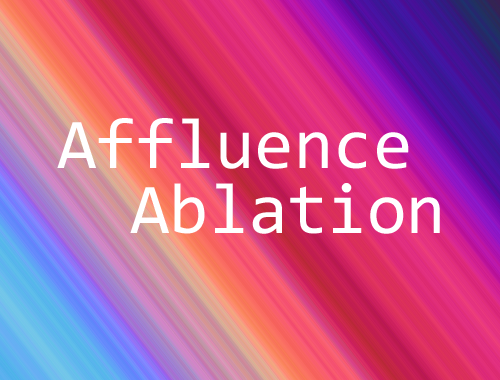
<style>
.page{position:relative;width:500px;height:380px}
.page>*{position:absolute;margin:0}
.t1{font:71.7px "Consolas";color:#ffffff}
</style>
<div class="page">
<p class="t1" style="left:57px;top:118px;width:352px;height:51px">Affluence</p>
<p class="t1" style="left:130px;top:183px;width:310px;height:51px">Ablation</p>
</div>
